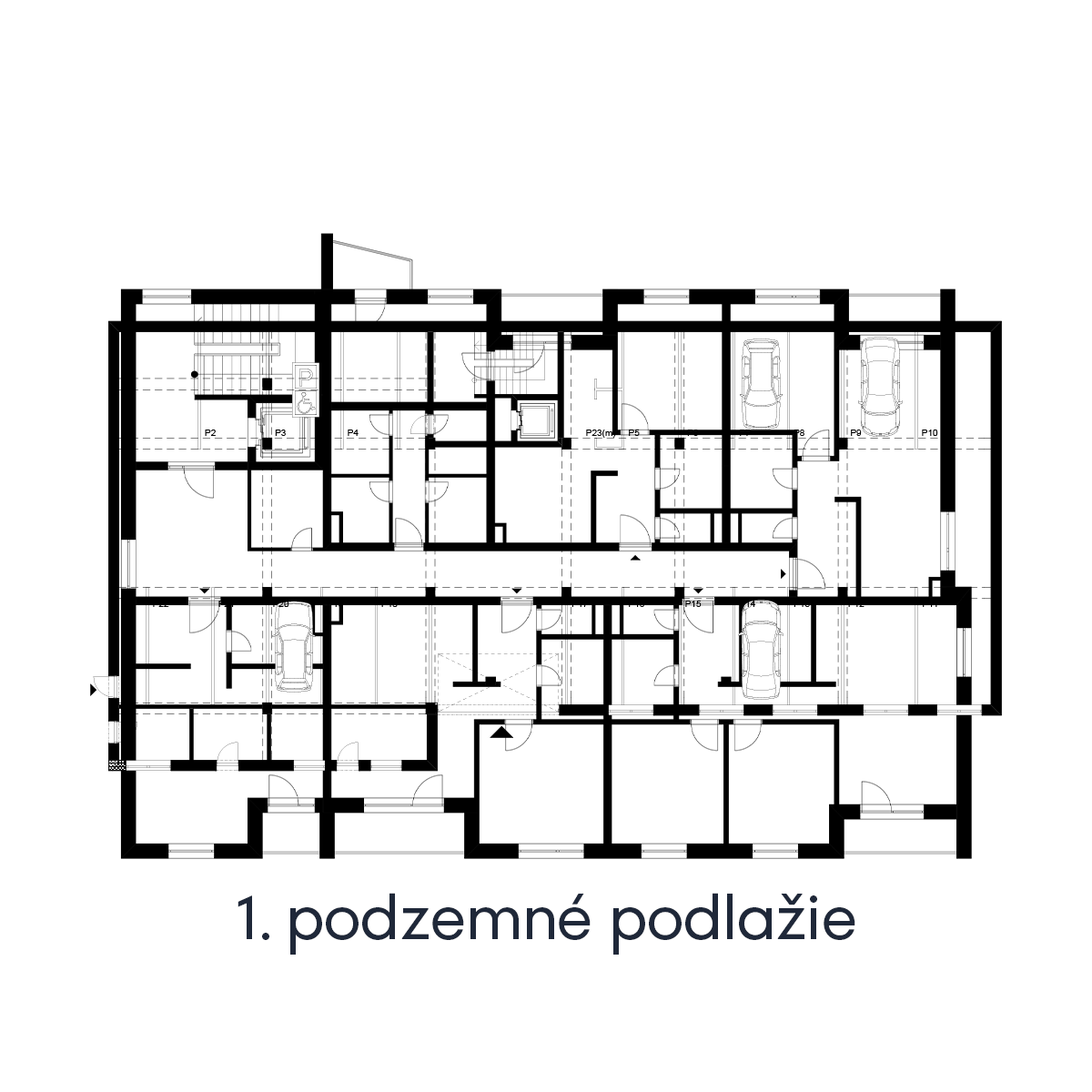
<style>
.page{position:relative;width:1092px;height:1092px;background:#ffffff}
.page>*{position:absolute;margin:0}
.t1{font:60.7px "SetupGrotesk-Regular";color:#1f2839}
</style>
<div class="page">
<p class="t1" style="left:238px;top:893px;width:617px;height:62px">1. podzemné podlažie</p>
</div>
